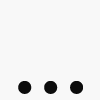
<style>
.page{position:relative;width:100px;height:100px;background:#f8f8f8}
.page>*{position:absolute;margin:0}
.t1{font:104.2px "ComicSansMS";color:#0c0c0c}
</style>
<div class="page">
<p class="t1" style="left:18px;top:81px;width:65px;height:13px">...</p>
</div>
